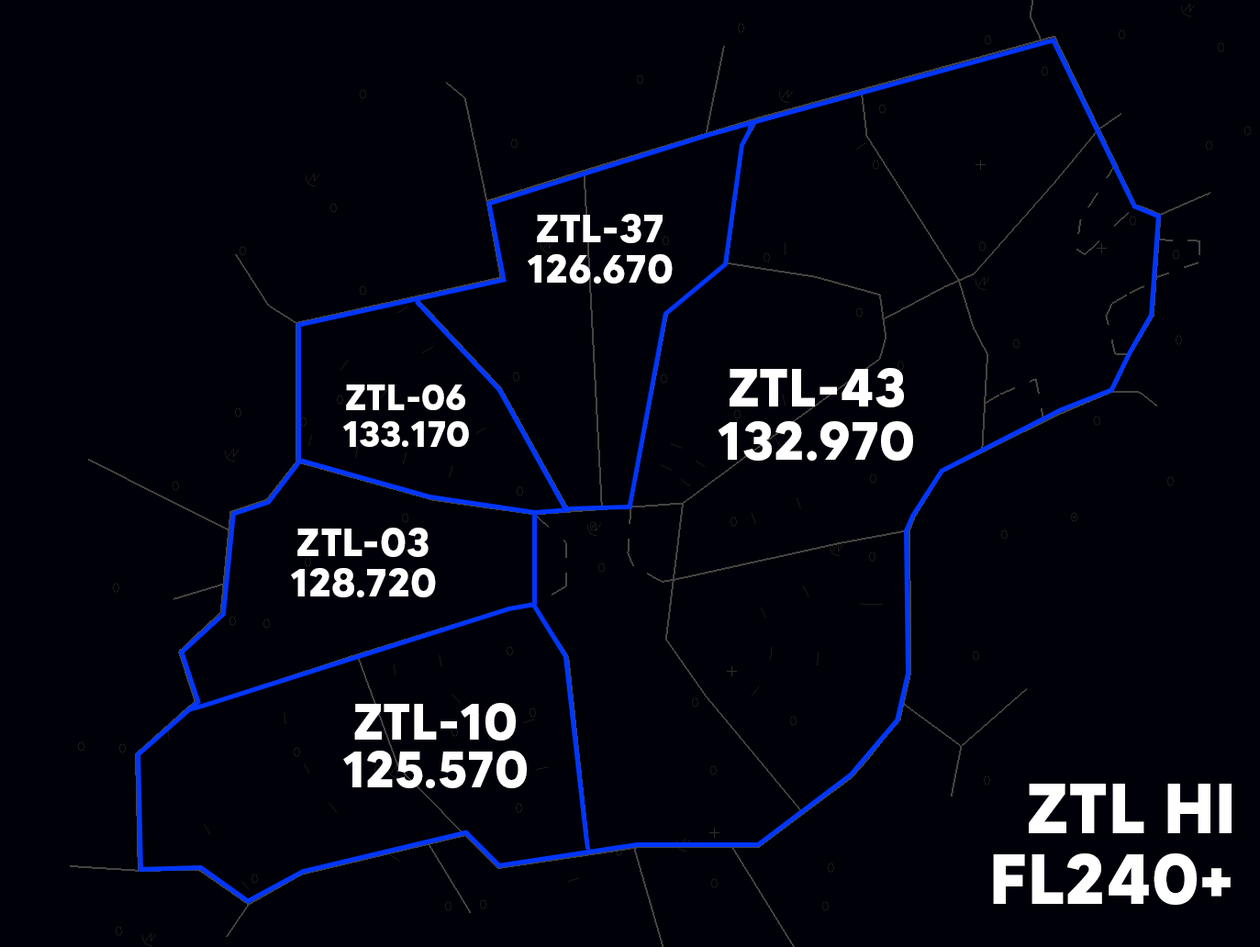
<style>
.page{position:relative;width:1260px;height:947px;background:#000008}
.page>*{position:absolute;margin:0}
.t1{font:39.4px/40.4px "MADETOMMY-Bold";color:#ffffff}
.t2{font:53.2px/53.2px "MADETOMMY-Bold";color:#ffffff}
.t3{font:35.8px/36.7px "MADETOMMY-Bold";color:#ffffff}
.t4{font:50.5px/47.7px "MADETOMMY-Bold";color:#ffffff}
</style>
<div class="page">
<p class="t1" style="left:527px;top:214px;width:145px;height:69px;text-align:center">ZTL-37<br>126.670</p>
<p class="t2" style="left:717px;top:368px;width:196px;height:93px;text-align:center">ZTL-43<br>132.970</p>
<p class="t3" style="left:343px;top:384px;width:126px;height:63px;text-align:center">ZTL-06<br>133.170</p>
<p class="t1" style="left:291px;top:527px;width:145px;height:70px;text-align:center">ZTL-03<br>128.720</p>
<p class="t4" style="left:343px;top:703px;width:184px;height:85px;text-align:center">ZTL-10<br>125.570</p>
</div>
